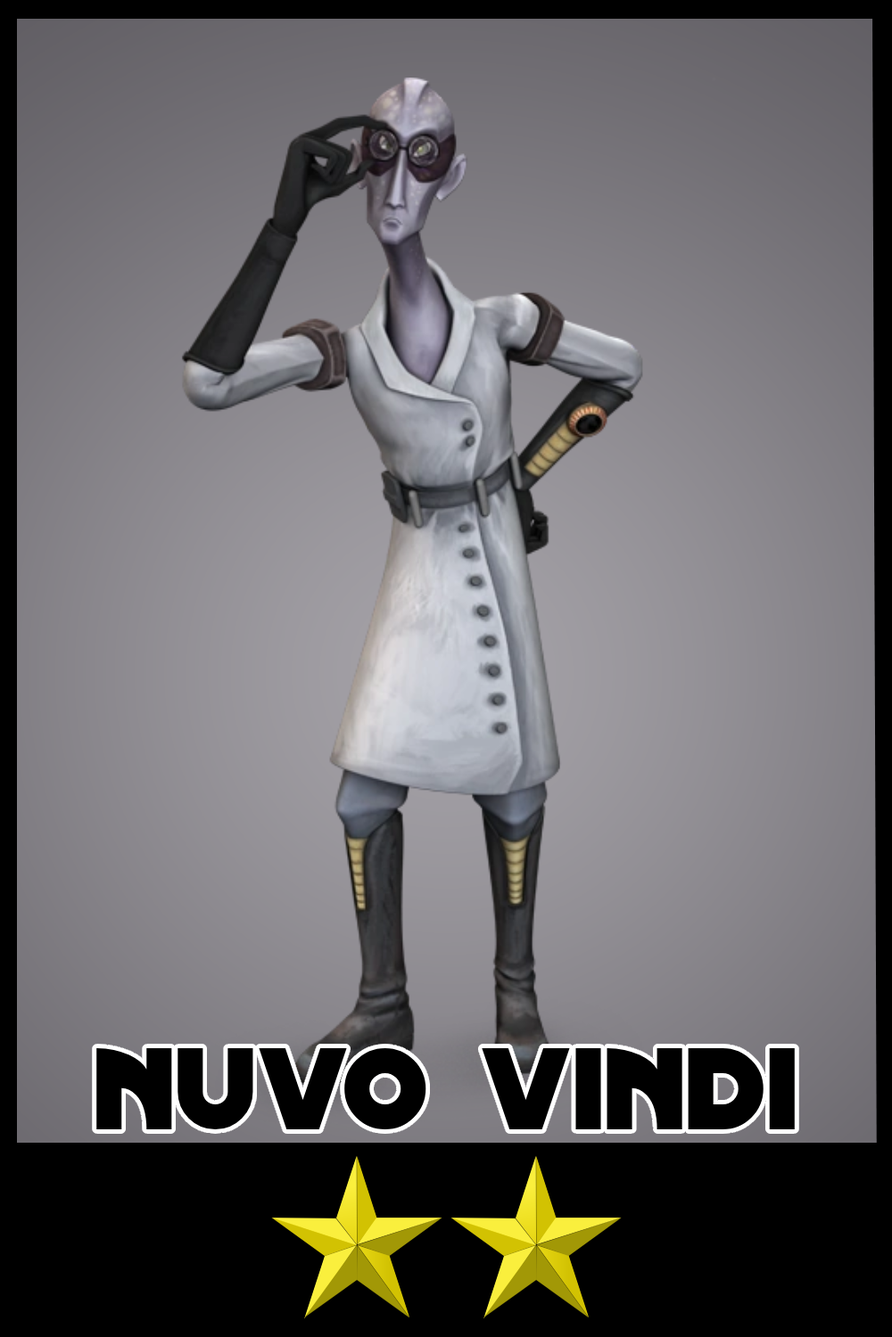
<style>
.page{position:relative;width:892px;height:1337px}
.page>*{position:absolute;margin:0}
.t1{font:125px "DistantGalaxy";color:#000000}
</style>
<div class="page">
<p class="t1" style="left:96px;top:1049px;width:698px;height:81px">nuvo vindi</p>
</div>
